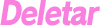
<style>
.page{position:relative;width:100px;height:26px;background:#f980de}
.page>*{position:absolute;margin:0}
.t1{font:32px "RodinPro-EB";letter-spacing:-0.054em;color:#f980de;font-style:italic;scale:0.89 1}
</style>
<div class="page">
<p class="t1" style="left:0px;top:0px;width:100px;height:26px">Deletar</p>
</div>
